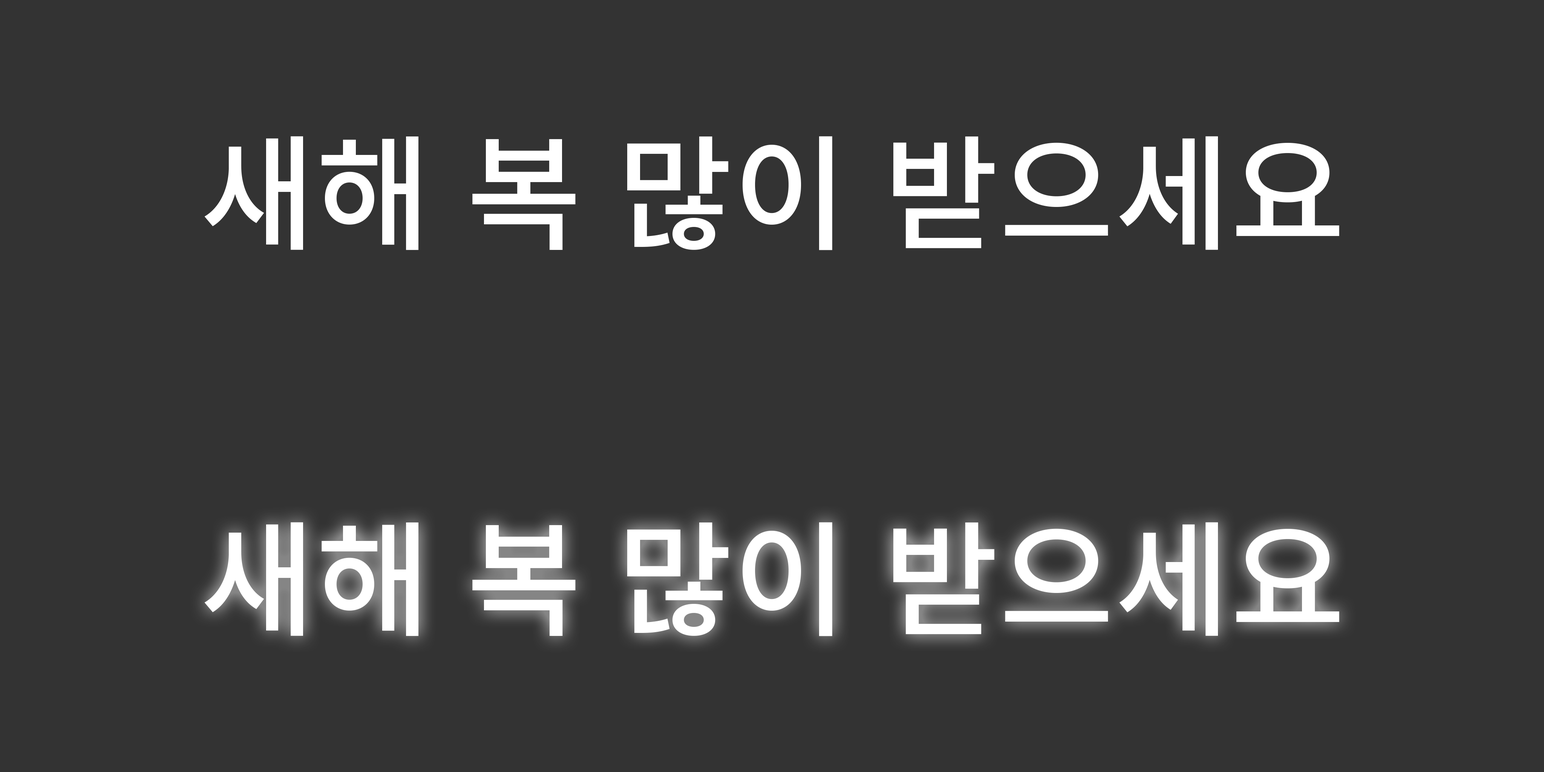
<style>
.page{position:relative;width:1544px;height:772px;background:#333333}
.page>*{position:absolute;margin:0}
.t1{font:125.7px "NotoSansCJKkr-Medium";color:#ffffff}
</style>
<div class="page">
<p class="t1" style="left:204px;top:136px;width:1136px;height:114px">새해 복 많이 받으세요</p>
</div>
